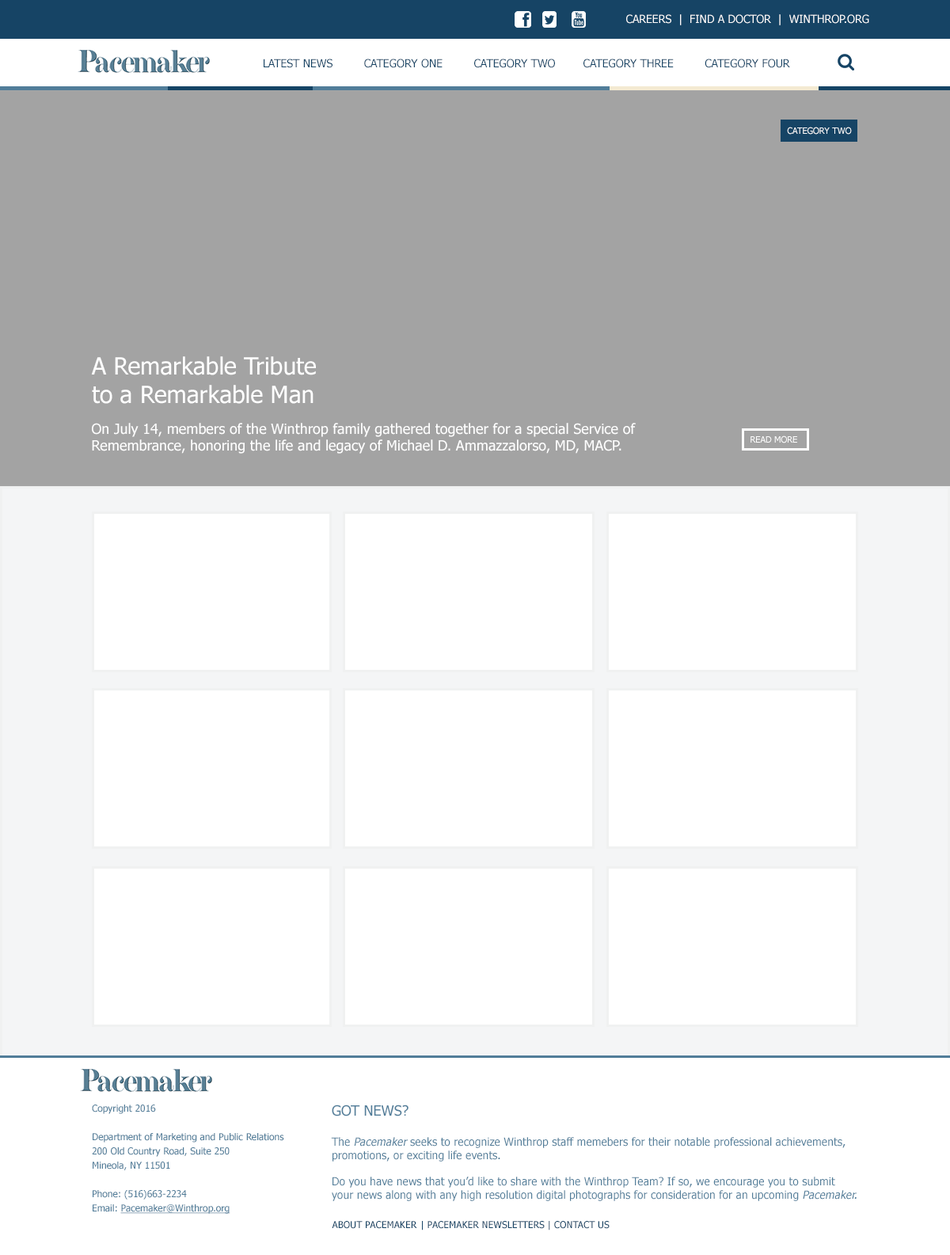
<style>
.page{position:relative;width:950px;height:1255px;background:#ffffff}
.page>*{position:absolute;margin:0}
.t1{font:11.1px "Tahoma";color:#ffffff;text-transform:uppercase}
.t2{font:11.1px "Tahoma";color:#164465;text-transform:uppercase}
.t3{font:8.7px "Tahoma";color:#ffffff;text-transform:uppercase}
.t4{font:23.8px "Tahoma";color:#ffffff}
.t5{font:14.3px "Tahoma";color:#ffffff}
.t6{font:9.5px/14.3px "Tahoma";color:#517d99}
.t7{font:9.5px/14.3px "Tahoma";color:#517d99;text-decoration:underline}
.t8{font:11.1px "Tahoma";color:#517d99}
.t9{font:14.3px "Tahoma";color:#517d99;text-transform:uppercase}
.t10{font:11.1px "Tahoma";color:#517d99;font-style:italic}
.t11{font:9.5px "Tahoma";color:#164465;text-transform:uppercase}
</style>
<div class="page">
<p class="t1" style="left:626px;top:14px;width:243px;height:11px">Careers  |  Find A Doctor  |  Winthrop.org</p>
<p class="t2" style="left:264px;top:59px;width:526px;height:9px">LATEST NEWS         Category ONE         Category TWO        Category THREE         CATEGORY FOUR</p>
<p class="t3" style="left:787px;top:127px;width:65px;height:8px">CATEGORY TWO</p>
<p class="t4" style="left:91px;top:356px;width:225px;height:48px">A Remarkable Tribute <br>to a Remarkable Man<br>an</p>
<p class="t5" style="left:92px;top:423px;width:544px;height:31px">On July 14, members of the Winthrop family gathered together for a special Service of Remembrance, honoring the life and legacy of Michael D. Ammazzalorso, MD, MACP.</p>
<p class="t3" style="left:751px;top:435px;width:46px;height:8px">Read More</p>
<p class="t6" style="left:92px;top:1105px;width:192px;height:109px">Copyright 2016<br><br>Department of Marketing and Public Relations<br>200 Old Country Road, Suite 250<br>Mineola, NY 11501<br><br>Phone: (516)663-2234<br>Email: <span class="t7">Pacemaker@Winthrop.org</span></p>
<p class="t8" style="left:331px;top:1105px;width:526px;height:96px"><span class="t9">Got News?<br><br></span>The<span class="t10"> Pacemaker</span> seeks to recognize Winthrop staff memebers for their notable professional achievements, promotions, or exciting life events.<br><br>Do you have news that you’d like to share with the Winthrop Team? If so, we encourage you to submit your news along with any high resolution digital photographs for consideration for an upcoming <span class="t10">Pacemaker.</span></p>
<p class="t11" style="left:332px;top:1221px;width:278px;height:9px">About PACEMAKER  | PACEMAKER NEWSLETTERS | Contact Us</p>
</div>
